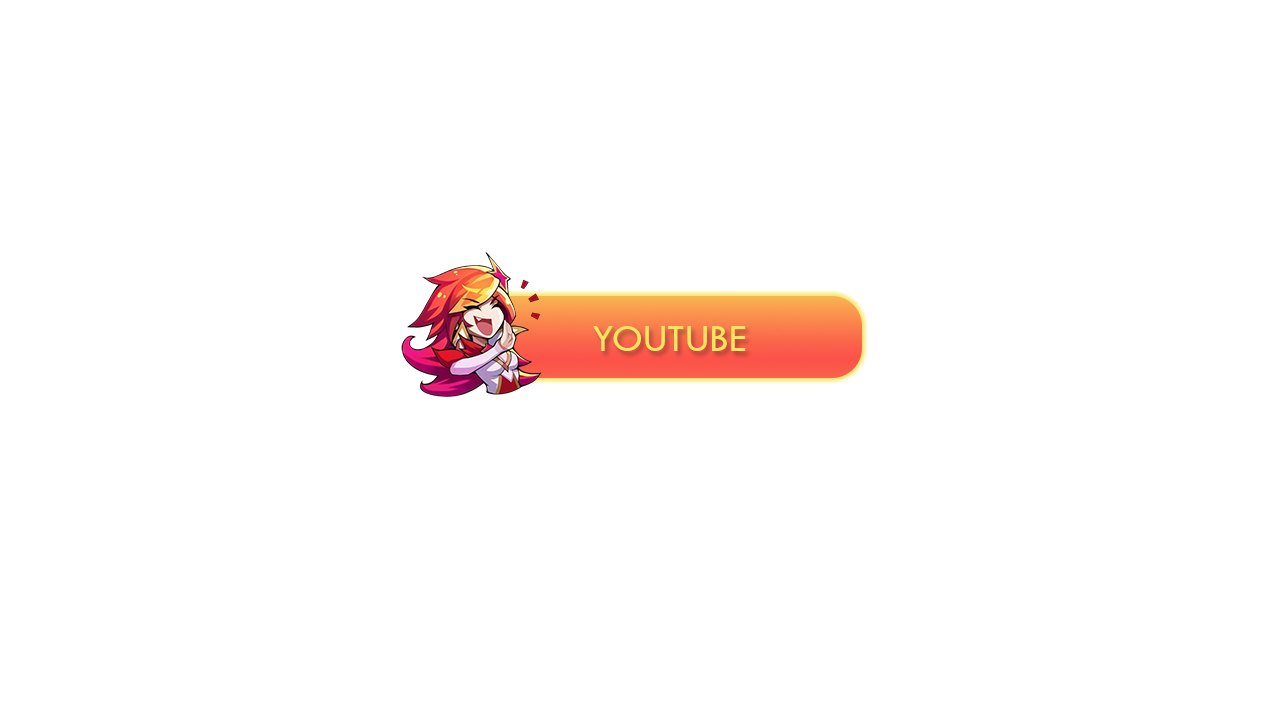
<style>
.page{position:relative;width:1280px;height:720px;background:#ffffff}
.page>*{position:absolute;margin:0}
.t1{font:40px "TwCenMT-Regular";color:#f7e55f}
</style>
<div class="page">
<p class="t1" style="left:593px;top:326px;width:153px;height:25px">YOUTUBE</p>
</div>
